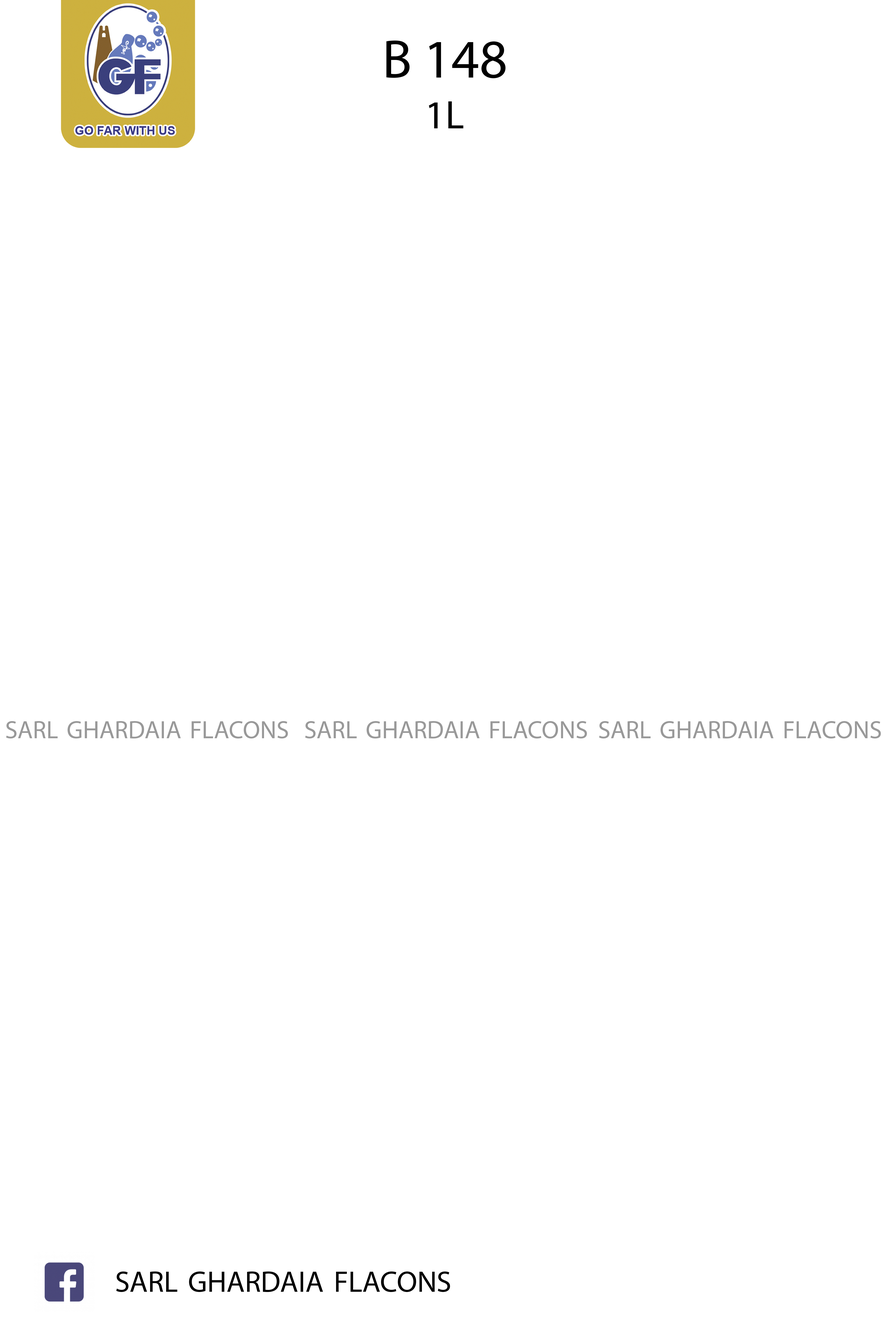
<style>
.page{position:relative;width:892px;height:1337px;background:#ffffff}
.page>*{position:absolute;margin:0}
.t1{font:54.6px "MyriadPro-Regular";color:#000000}
.t2{font:39.9px "MyriadPro-Regular";color:#000000}
.t3{font:25px "MyriadPro-Regular";color:#999999}
.t4{font:29.7px "MyriadPro-Regular";color:#000000}
</style>
<div class="page">
<p class="t1" style="left:386px;top:40px;width:119px;height:38px">B 148</p>
<p class="t2" style="left:429px;top:101px;width:34px;height:27px">1L</p>
<p class="t3" style="left:6px;top:721px;width:282px;height:18px">SARL GHARDAIA FLACONS</p>
<p class="t3" style="left:305px;top:721px;width:282px;height:18px">SARL GHARDAIA FLACONS</p>
<p class="t3" style="left:599px;top:721px;width:281px;height:18px">SARL GHARDAIA FLACONS</p>
<p class="t4" style="left:116px;top:1272px;width:334px;height:21px">SARL GHARDAIA FLACONS</p>
</div>
